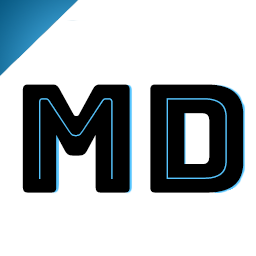
<style>
.page{position:relative;width:256px;height:256px;background:#ffffff}
.page>*{position:absolute;margin:0}
.t1{font:150px "BungeeInline-Regular";color:#000000}
</style>
<div class="page">
<p class="t1" style="left:22px;top:84px;width:222px;height:109px">md</p>
</div>
